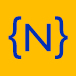
<style>
.page{position:relative;width:76px;height:76px;background:#ffbf00}
.page>*{position:absolute;margin:0}
.t1{font:45.9px "GillSans";color:#0030b2}
.t2{font:40.2px "GillSans";color:#0030b2}
</style>
<div class="page">
<p class="t1" style="left:8px;top:16px;width:60px;height:43px">{<span class="t2">N</span>}</p>
</div>
